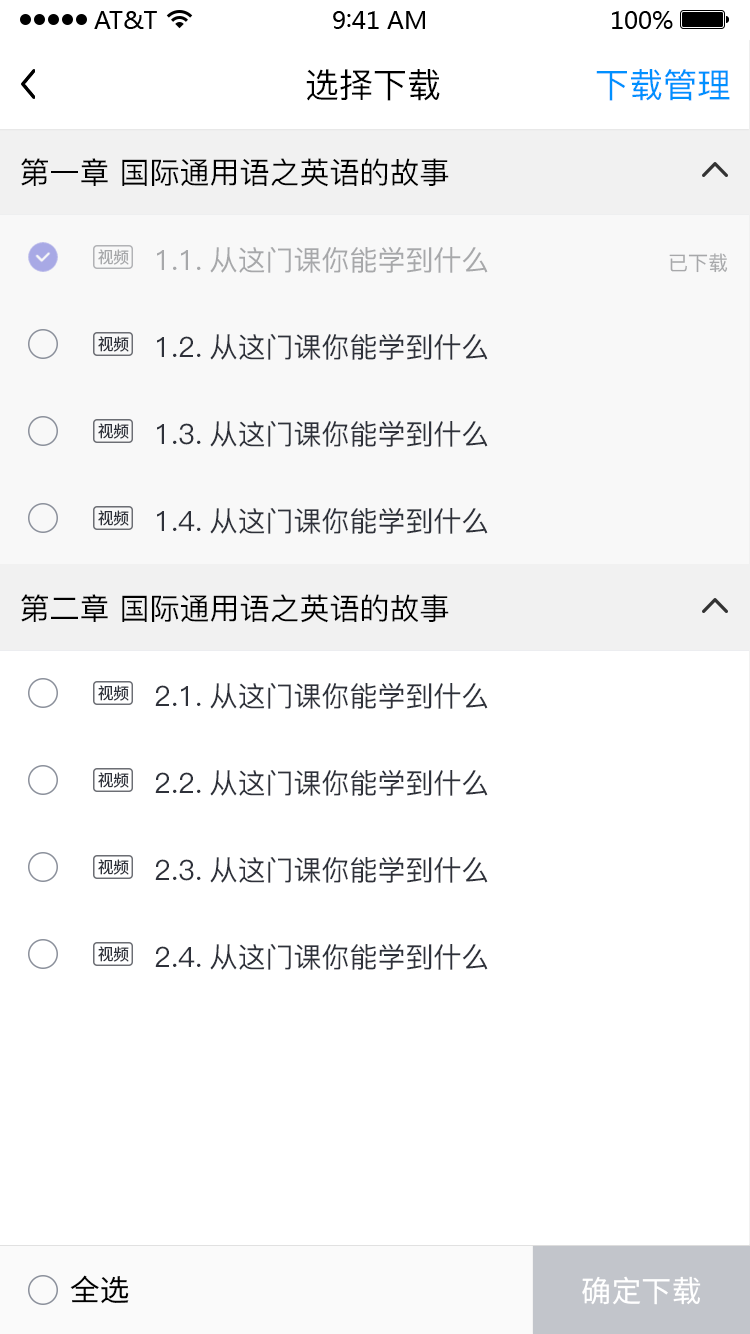
<style>
.page{position:relative;width:750px;height:1334px;background:#ffffff}
.page>*{position:absolute;margin:0}
.t1{font:34px "PingFang-SC-Medium";color:#000000}
.t2{font:34px "PingFang-SC-Medium";color:#0090ff}
.t3{font:30px "PingFang-SC-Medium";color:#000000}
.t4{font:28px "PingFang-SC-Medium";color:#a7a8aa}
.t5{font:16px "SourceHanSansCN-Regular";color:#a7a8aa}
.t6{font:20px "PingFang-SC-Medium";color:#a7a8aa}
.t7{font:16px "SourceHanSansCN-Regular";color:#2e313a}
.t8{font:28px "PingFang-SC-Medium";color:#2e313a}
.t9{font:30px "SourceHanSansCN-Regular";color:#000000}
.t10{font:30px "SourceHanSansCN-Regular";color:#ffffff}
</style>
<div class="page">
<p class="t1" style="left:306px;top:69px;width:134px;height:32px">选择下载</p>
<p class="t2" style="left:596px;top:69px;width:134px;height:32px">下载管理</p>
<p class="t3" style="left:21px;top:158px;width:428px;height:29px">第一章 国际通用语之英语的故事</p>
<p class="t4" style="left:157px;top:246px;width:331px;height:27px">1.1.从这门课你能学到什么</p>
<p class="t5" style="left:98px;top:249px;width:31px;height:16px">视频</p>
<p class="t6" style="left:669px;top:253px;width:59px;height:20px">已下载</p>
<p class="t7" style="left:98px;top:336px;width:31px;height:16px">视频</p>
<p class="t8" style="left:157px;top:333px;width:331px;height:27px">1.2.从这门课你能学到什么</p>
<p class="t7" style="left:98px;top:423px;width:31px;height:16px">视频</p>
<p class="t8" style="left:157px;top:420px;width:331px;height:27px">1.3.从这门课你能学到什么</p>
<p class="t7" style="left:98px;top:510px;width:31px;height:16px">视频</p>
<p class="t8" style="left:157px;top:507px;width:331px;height:27px">1.4.从这门课你能学到什么</p>
<p class="t3" style="left:21px;top:594px;width:428px;height:29px">第二章 国际通用语之英语的故事</p>
<p class="t7" style="left:98px;top:685px;width:31px;height:16px">视频</p>
<p class="t8" style="left:155px;top:682px;width:333px;height:27px">2.1.从这门课你能学到什么</p>
<p class="t7" style="left:98px;top:772px;width:31px;height:16px">视频</p>
<p class="t8" style="left:155px;top:769px;width:333px;height:27px">2.2.从这门课你能学到什么</p>
<p class="t8" style="left:155px;top:856px;width:333px;height:27px">2.3.从这门课你能学到什么</p>
<p class="t7" style="left:98px;top:859px;width:31px;height:16px">视频</p>
<p class="t7" style="left:98px;top:946px;width:31px;height:16px">视频</p>
<p class="t8" style="left:155px;top:943px;width:333px;height:27px">2.4.从这门课你能学到什么</p>
<p class="t9" style="left:70px;top:1275px;width:59px;height:29px">全选</p>
<p class="t10" style="left:582px;top:1276px;width:119px;height:29px">确定下载</p>
</div>
